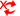
<style>
.page{position:relative;width:20px;height:16px;background:#ffffff}
.page>*{position:absolute;margin:0}
.t1{font:15px "DejaVuSans";color:#ff0000}
</style>
<div class="page">
<p class="t1" style="left:0px;top:0px;width:8px;height:9px">x</p>
</div>
